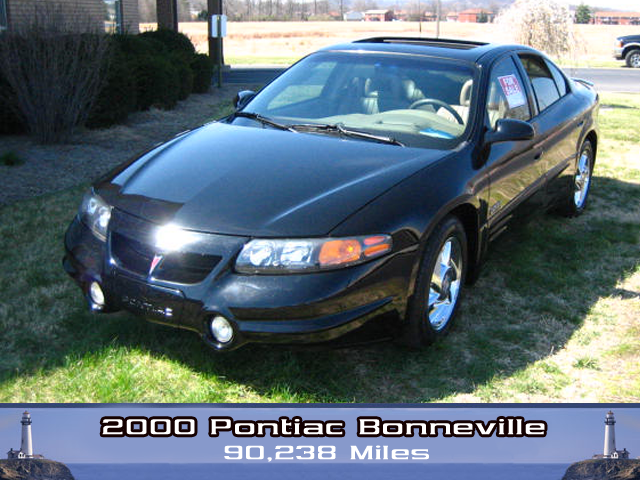
<style>
.page{position:relative;width:640px;height:480px}
.page>*{position:absolute;margin:0}
.t1{font:25px "Vibrocentric";letter-spacing:0.025em;color:#ffffff;font-weight:bold}
.t2{font:22.5px "Vibrocentric";letter-spacing:0.025em;color:#ffffff;font-weight:bold}
</style>
<div class="page">
<p class="t1" style="left:102px;top:419px;width:443px;height:16px">2000 Pontiac Bonneville</p>
<p class="t2" style="left:224px;top:445px;width:205px;height:17px">90,238 Miles</p>
</div>
